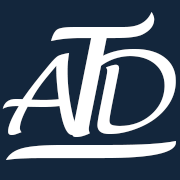
<style>
.page{position:relative;width:180px;height:180px;background:#13263c}
.page>*{position:absolute;margin:0}
.t1{font:150px "LucidaHandwriting-Italic";color:#ffffff}
.t2{font:108.3px "LucidaHandwriting-Italic";color:#ffffff}
.t3{font:176.5px "LucidaHandwriting-Italic";color:#ffffff;scale:2.27 1}
</style>
<div class="page">
<p class="t1" style="left:51px;top:12px;width:104px;height:125px">T</p>
<p class="t2" style="left:2px;top:53px;width:79px;height:82px">A</p>
<p class="t2" style="left:86px;top:49px;width:90px;height:85px">D</p>
<p class="t3" style="left:5px;top:141px;width:171px;height:19px">_</p>
</div>
